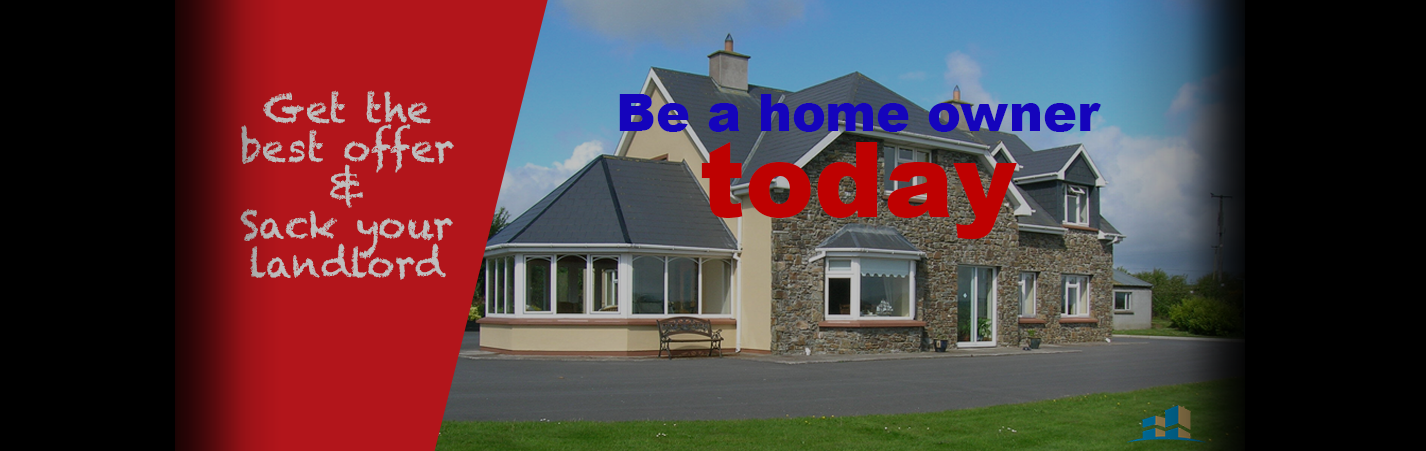
<style>
.page{position:relative;width:1426px;height:451px;background:#000000}
.page>*{position:absolute;margin:0}
.t1{font:38.7px/38.7px "Chalkduster";color:#bebebe}
.t2{font:51.6px/86px "Arial-Black"}
.t3{font:105.4px/86px "Arial-Black"}
</style>
<div class="page">
<p class="t1" style="left:240px;top:90px;width:214px;height:190px;text-align:center">Get the<br>best offer<br>&amp;<br>Sack your<br>landlord</p>
<p class="t2" style="left:619px;top:94px;width:482px;height:145px;text-align:center">Be a home owner<br><span class="t3">today</span></p>
</div>
